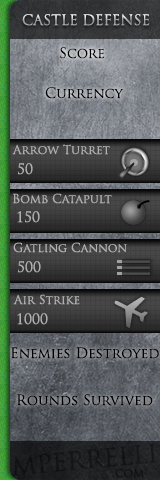
<style>
.page{position:relative;width:160px;height:480px}
.page>*{position:absolute;margin:0}
.t1{font:14px "TrajanPro-Regular";color:#b0b0b0}
.t2{font:14px "TrajanPro-Regular";color:#000000}
.t3{font:12px "TrajanPro-Regular";color:#b0b0b0}
.t4{font:29px "TrajanPro-Regular";color:#000000;scale:0.94 1}
.t5{font:12px "TrajanPro-Regular";color:#000000}
</style>
<div class="page">
<p class="t1" style="left:22px;top:14px;width:128px;height:12px">CASTLE DEFENSE</p>
<p class="t2" style="left:60px;top:47px;width:44px;height:12px">Score</p>
<p class="t2" style="left:45px;top:87px;width:79px;height:12px">Currency</p>
<p class="t3" style="left:12px;top:144px;width:98px;height:11px">Arrow Turret</p>
<p class="t1" style="left:18px;top:163px;width:15px;height:12px">50</p>
<p class="t3" style="left:13px;top:193px;width:99px;height:11px">Bomb Catapult</p>
<p class="t1" style="left:17px;top:211px;width:23px;height:12px">150</p>
<p class="t3" style="left:13px;top:242px;width:114px;height:11px">Gatling Cannon</p>
<p class="t1" style="left:18px;top:261px;width:23px;height:12px">500</p>
<p class="t3" style="left:13px;top:294px;width:67px;height:11px">Air Strike</p>
<p class="t1" style="left:17px;top:313px;width:31px;height:12px">1000</p>
<p class="t2" style="left:11px;top:347px;width:148px;height:12px">Enemies Destroyed</p>
<p class="t2" style="left:17px;top:394px;width:136px;height:12px">Rounds Survived</p>
<p class="t4" style="left:13px;top:443px;width:144px;height:33px;rotate:-5deg;opacity:0.39">mperrelli</p>
<p class="t5" style="left:112px;top:469px;width:33px;height:9px;opacity:0.59">.com</p>
</div>
